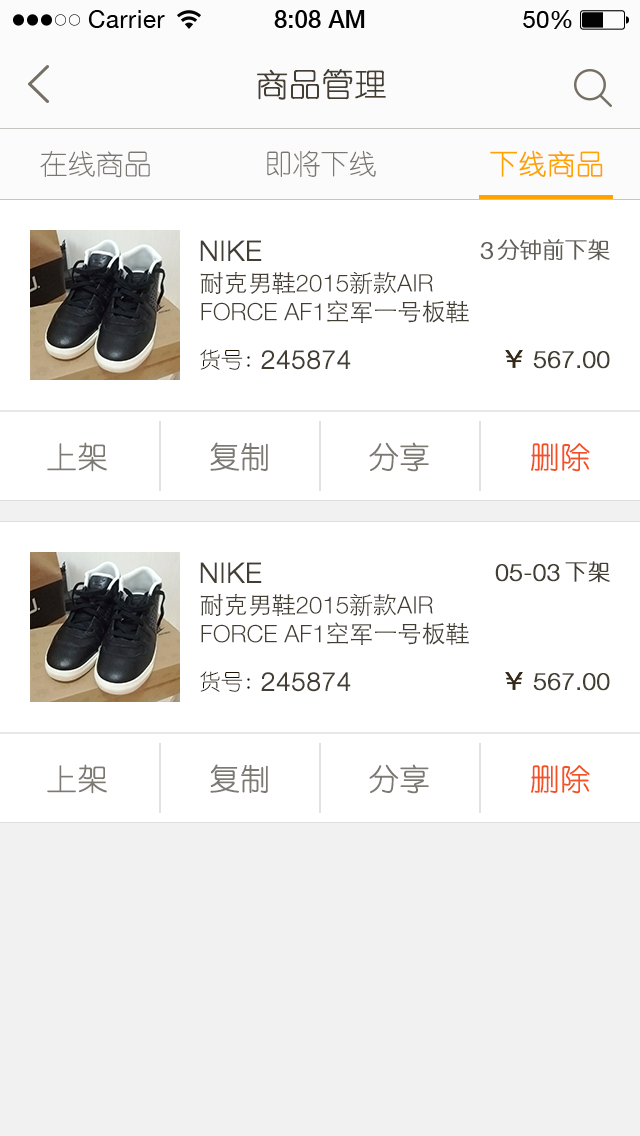
<style>
.page{position:relative;width:640px;height:1136px;background:#ffffff}
.page>*{position:absolute;margin:0}
.t1{font:32px "YouYuan";color:#433d33;text-transform:uppercase;font-weight:bold}
.t2{font:28px "YouYuan";color:#7a7772;text-transform:uppercase}
.t3{font:28px "YouYuan";color:#ffa300;text-transform:uppercase;font-weight:bold}
.t4{font:28px "HelveticaNeueLTPro-Lt";color:#433e34;text-transform:uppercase;font-weight:bold}
.t5{font:24px "HelveticaNeueLTPro-Lt";color:#625e58;text-transform:uppercase;font-weight:bold}
.t6{font:22px "YouYuan";color:#625e58;text-transform:uppercase;font-weight:bold}
.t7{font:24px "HelveticaNeueLTPro-Lt";color:#433e34;text-transform:uppercase}
.t8{font:24px "STHeitiSC-Light";color:#433e34;text-transform:uppercase}
.t9{font:22px "YouYuan";color:#1b1100;text-transform:uppercase}
.t10{font:26px "HelveticaNeueLTPro-Lt";color:#433e34;text-transform:uppercase;font-weight:bold}
.t11{font:24px "HelveticaNeueLTPro-Lt";color:#433e34;text-transform:uppercase;font-weight:bold}
.t12{font:30px "YouYuan";color:#7c7973;text-transform:uppercase;font-weight:bold}
.t13{font:30px "YouYuan";color:#f35324;text-transform:uppercase;font-weight:bold}
.t14{font:22px "YouYuan";color:#433e34;text-transform:uppercase;font-weight:bold}
</style>
<div class="page">
<p class="t1" style="left:257px;top:69px;width:129px;height:31px">商品管理</p>
<p class="t2" style="left:40px;top:150px;width:110px;height:28px">在线商品</p>
<p class="t2" style="left:267px;top:150px;width:109px;height:28px">即将下线</p>
<p class="t3" style="left:490px;top:150px;width:113px;height:28px">下线商品</p>
<p class="t4" style="left:200px;top:240px;width:62px;height:21px">NIKE</p>
<p class="t5" style="left:480px;top:242px;width:13px;height:18px">3</p>
<p class="t6" style="left:497px;top:239px;width:113px;height:22px">分钟前下架</p>
<p class="t7" style="left:200px;top:271px;width:269px;height:52px"><span class="t8">耐克男鞋</span>2015<span class="t8">新款</span>air force AF1<span class="t8">空军一号板鞋</span></p>
<p class="t9" style="left:200px;top:349px;width:50px;height:21px">货号:</p>
<p class="t10" style="left:261px;top:350px;width:90px;height:20px">245874</p>
<p class="t11" style="left:533px;top:351px;width:77px;height:18px">567.00</p>
<p class="t12" style="left:47px;top:442px;width:60px;height:30px">上架</p>
<p class="t12" style="left:210px;top:442px;width:58px;height:29px">复制</p>
<p class="t12" style="left:369px;top:442px;width:60px;height:30px">分享</p>
<p class="t13" style="left:531px;top:443px;width:59px;height:29px">删除</p>
<p class="t4" style="left:200px;top:562px;width:62px;height:21px">NIKE</p>
<p class="t11" style="left:495px;top:564px;width:65px;height:18px">05-03</p>
<p class="t14" style="left:565px;top:561px;width:45px;height:22px">下架</p>
<p class="t7" style="left:200px;top:593px;width:269px;height:52px"><span class="t8">耐克男鞋</span>2015<span class="t8">新款</span>air force AF1<span class="t8">空军一号板鞋</span></p>
<p class="t9" style="left:200px;top:671px;width:50px;height:21px">货号:</p>
<p class="t10" style="left:261px;top:672px;width:90px;height:20px">245874</p>
<p class="t11" style="left:533px;top:673px;width:77px;height:18px">567.00</p>
<p class="t12" style="left:47px;top:764px;width:60px;height:30px">上架</p>
<p class="t12" style="left:210px;top:764px;width:58px;height:29px">复制</p>
<p class="t12" style="left:369px;top:764px;width:60px;height:30px">分享</p>
<p class="t13" style="left:531px;top:765px;width:59px;height:29px">删除</p>
</div>
